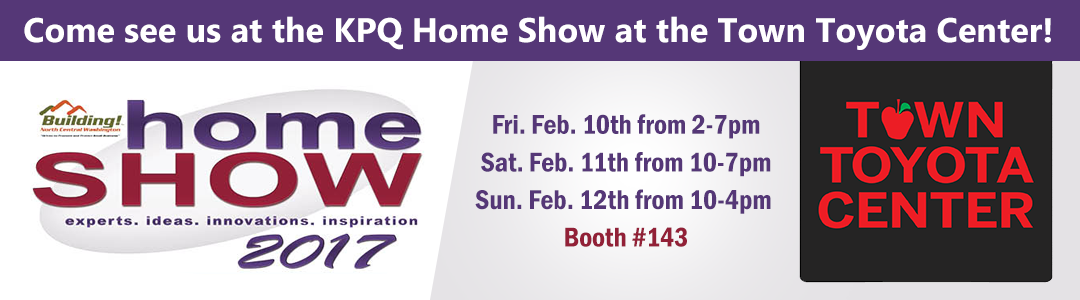
<style>
.page{position:relative;width:1080px;height:300px}
.page>*{position:absolute;margin:0}
.t1{font:34.1px "Ebrima-Bold";color:#ffffff}
.t2{font:27.9px/18.8px "FranklinGothic-DemiCond";color:#553777}
.t3{font:27.9px/18.8px "FranklinGothic-DemiCond";color:#922037}
</style>
<div class="page">
<p class="t1" style="left:24px;top:16px;width:1027px;height:34px">Come see us at the KPQ Home Show at the Town Toyota Center!</p>
<p class="t2" style="left:475px;top:114px;width:296px;height:133px;text-align:center">Fri. Feb. 10th from 2-7pm<br><br>Sat. Feb. 11th from 10-7pm<br><br>Sun. Feb. 12th from 10-4pm <br><br><span class="t3">Booth #143</span></p>
</div>
